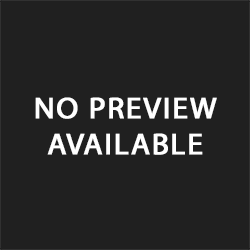
<style>
.page{position:relative;width:250px;height:250px;background:#202020}
.page>*{position:absolute;margin:0}
.t1{font:30px/36px "MyriadWebPro";letter-spacing:0.04em;color:#ffffff;font-weight:bold}
</style>
<div class="page">
<p class="t1" style="left:35px;top:97px;width:182px;height:58px;text-align:center">NO PREVIEW<br>AVAILABLE</p>
</div>
